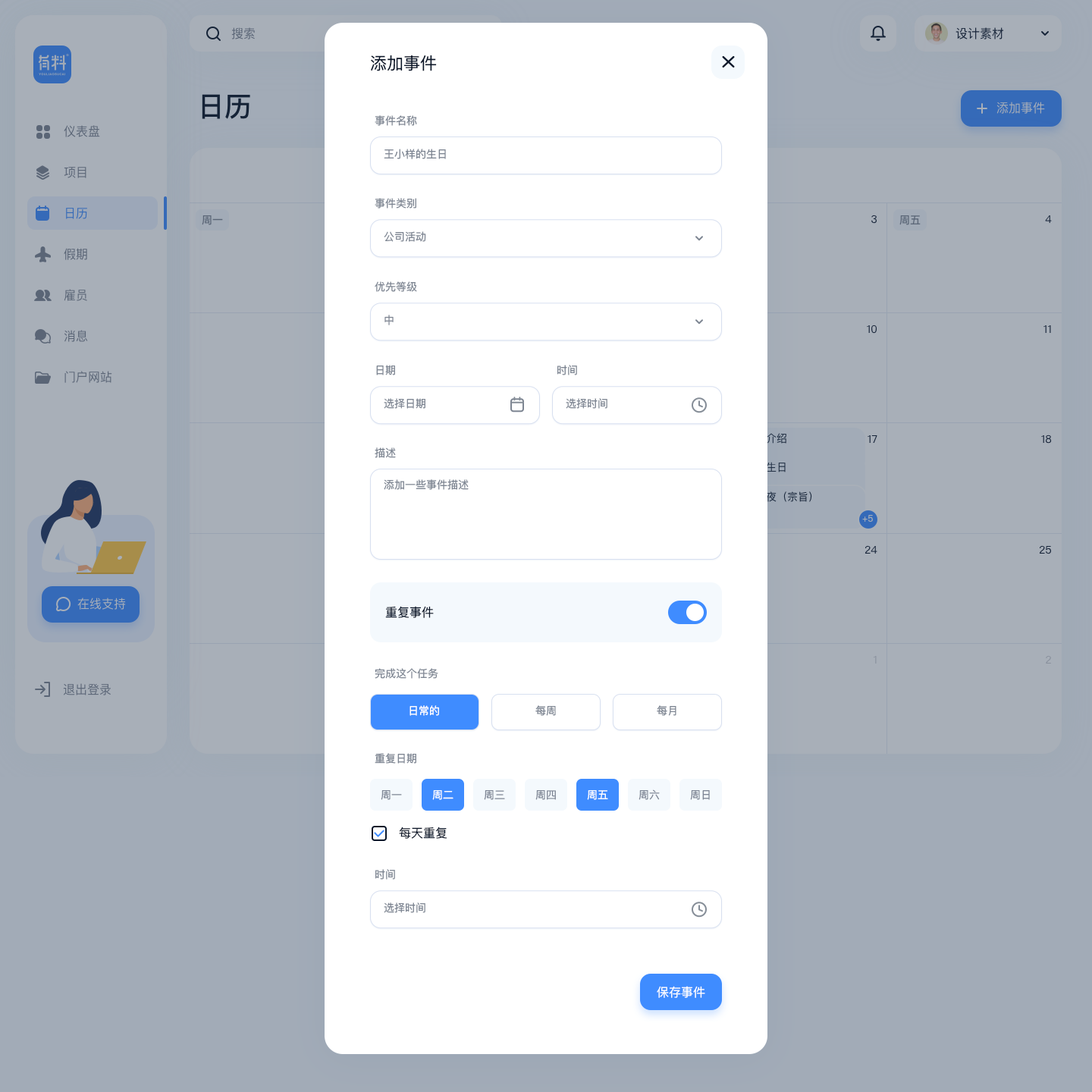
<style>
.page{position:relative;width:1092px;height:1092px;background:#ffffff}
.page>*{position:absolute;margin:0}
.t1{font:16.7px "PingFangSC-Regular";color:#0a1629}
.t2{font:10.6px "PingFangSC-Regular";color:#7d8592}
.t3{font:12.1px "PingFangSC-Regular";color:#0a1629}
.t4{font:10.6px "PingFangSC-Regular";color:#ffffff}
.t5{font:10.6px "PingFangSC-Regular";color:#7d8594}
.t6{font:12.1px "PingFangSC-Regular";color:#ffffff}
</style>
<div class="page">
<p class="t1" style="left:371px;top:55px;width:66px;height:16px">添加事件</p>
<p class="t2" style="left:375px;top:115px;width:42px;height:11px">事件名称</p>
<p class="t2" style="left:384px;top:149px;width:62px;height:10px">王小样的生日</p>
<p class="t2" style="left:375px;top:198px;width:41px;height:11px">事件类别</p>
<p class="t2" style="left:384px;top:231px;width:42px;height:11px">公司活动</p>
<p class="t2" style="left:375px;top:281px;width:42px;height:11px">优先等级</p>
<p class="t2" style="left:384px;top:315px;width:10px;height:10px">中</p>
<p class="t2" style="left:376px;top:365px;width:19px;height:10px">日期</p>
<p class="t2" style="left:557px;top:365px;width:20px;height:10px">时间</p>
<p class="t2" style="left:384px;top:398px;width:41px;height:11px">选择日期</p>
<p class="t2" style="left:566px;top:398px;width:41px;height:11px">选择时间</p>
<p class="t2" style="left:375px;top:447px;width:21px;height:11px">描述</p>
<p class="t2" style="left:384px;top:479px;width:85px;height:11px">添加一些事件描述</p>
<p class="t3" style="left:385px;top:606px;width:49px;height:12px">重复事件</p>
<p class="t2" style="left:375px;top:668px;width:63px;height:11px">完成这个任务</p>
<p class="t4" style="left:409px;top:705px;width:30px;height:11px">日常的</p>
<p class="t2" style="left:535px;top:705px;width:21px;height:11px">每周</p>
<p class="t2" style="left:657px;top:705px;width:19px;height:11px">每月</p>
<p class="t2" style="left:375px;top:753px;width:41px;height:11px">重复日期</p>
<p class="t5" style="left:381px;top:790px;width:21px;height:10px">周一</p>
<p class="t4" style="left:432px;top:790px;width:21px;height:10px">周二</p>
<p class="t5" style="left:484px;top:790px;width:21px;height:10px">周三</p>
<p class="t5" style="left:535px;top:790px;width:21px;height:10px">周四</p>
<p class="t4" style="left:587px;top:790px;width:21px;height:10px">周五</p>
<p class="t5" style="left:639px;top:789px;width:21px;height:11px">周六</p>
<p class="t5" style="left:690px;top:790px;width:20px;height:10px">周日</p>
<p class="t3" style="left:399px;top:827px;width:48px;height:12px">每天重复</p>
<p class="t2" style="left:375px;top:869px;width:20px;height:11px">时间</p>
<p class="t2" style="left:384px;top:902px;width:41px;height:11px">选择时间</p>
<p class="t6" style="left:657px;top:986px;width:48px;height:12px">保存事件</p>
</div>
